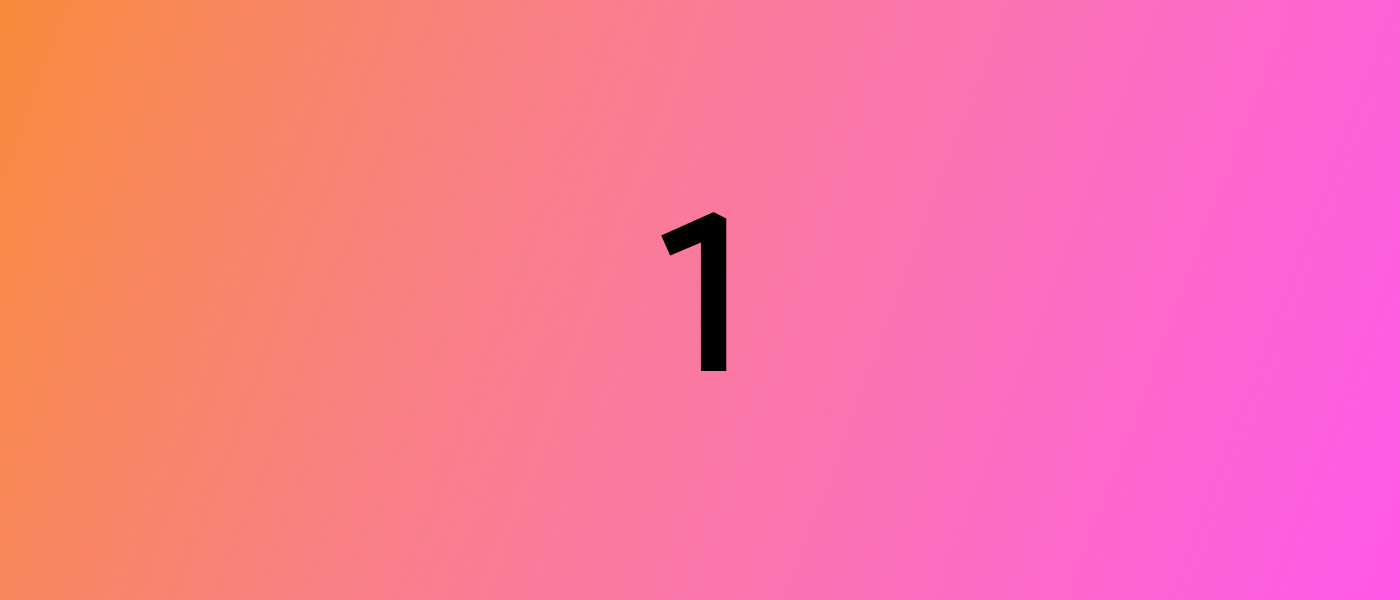
<style>
.page{position:relative;width:1400px;height:600px}
.page>*{position:absolute;margin:0}
.t1{font:300px "Alef-Regular";color:#000000}
</style>
<div class="page">
<p class="t1" style="left:661px;top:212px;width:66px;height:159px">1</p>
</div>
